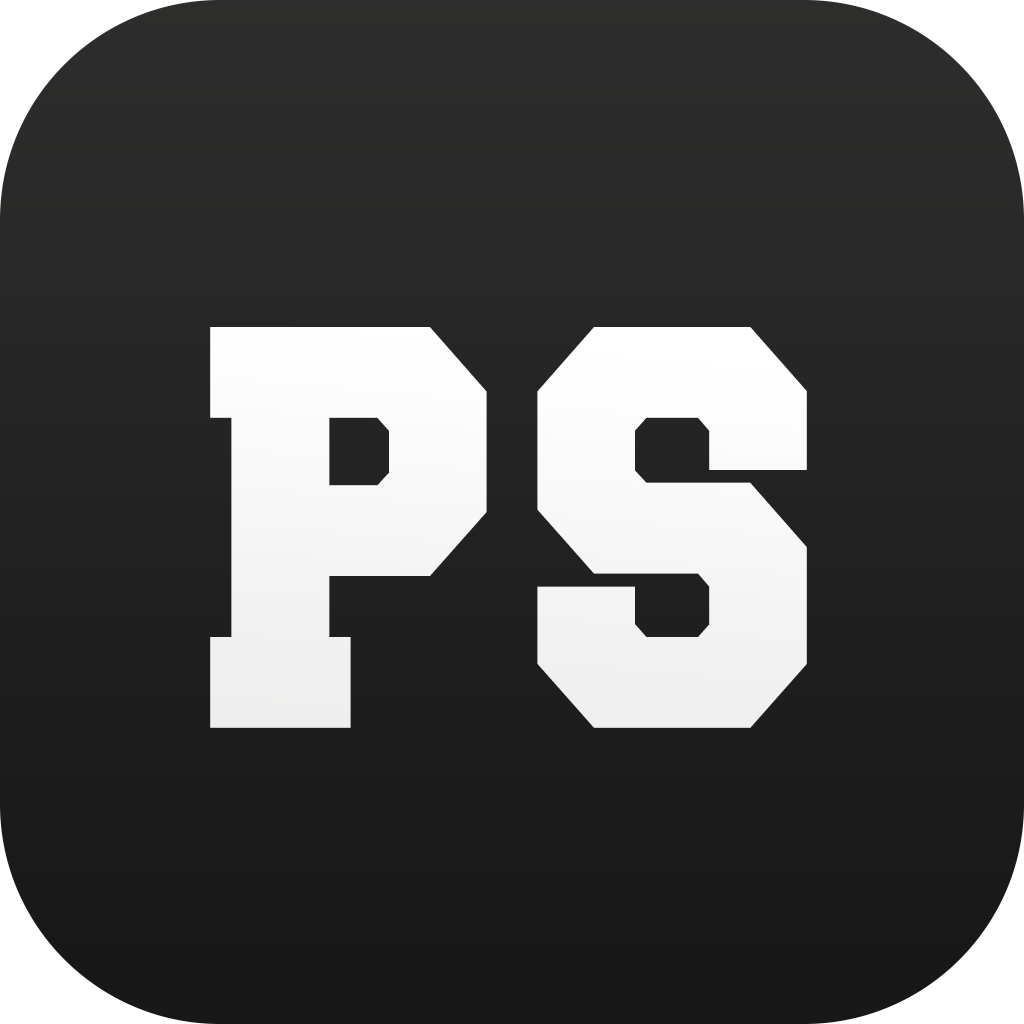
<style>
.page{position:relative;width:1024px;height:1024px}
.page>*{position:absolute;margin:0}
.t1{font:480.2px "Freshman";letter-spacing:0.06em;color:#fbfcfc;scale:0.88 1}
</style>
<div class="page">
<p class="t1" style="left:210px;top:327px;width:597px;height:401px">PS</p>
</div>
